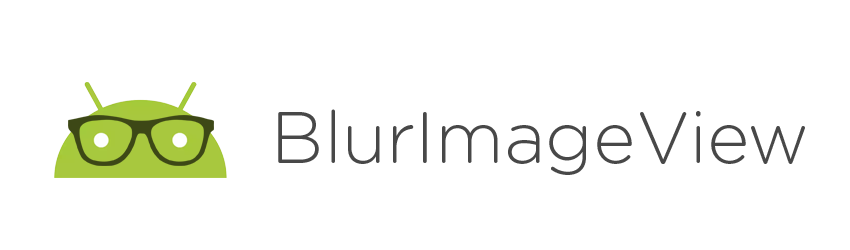
<style>
.page{position:relative;width:850px;height:250px;background:#ffffff}
.page>*{position:absolute;margin:0}
.t1{font:72.5px "GothamRounded-Light";color:#484848}
</style>
<div class="page">
<p class="t1" style="left:278px;top:109px;width:527px;height:66px">BlurImageView</p>
</div>
